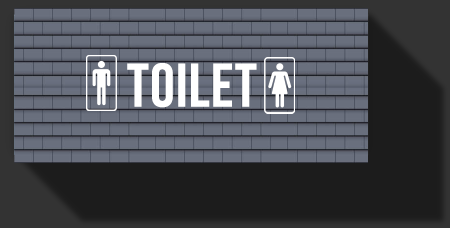
<style>
.page{position:relative;width:450px;height:228px;background:#1c1c1c}
.page>*{position:absolute;margin:0}
.t1{font:61.7px "BebasNeue";letter-spacing:0.02em;color:#ffffff}
</style>
<div class="page">
<p class="t1" style="left:127px;top:63px;width:130px;height:45px">TOILET</p>
</div>
